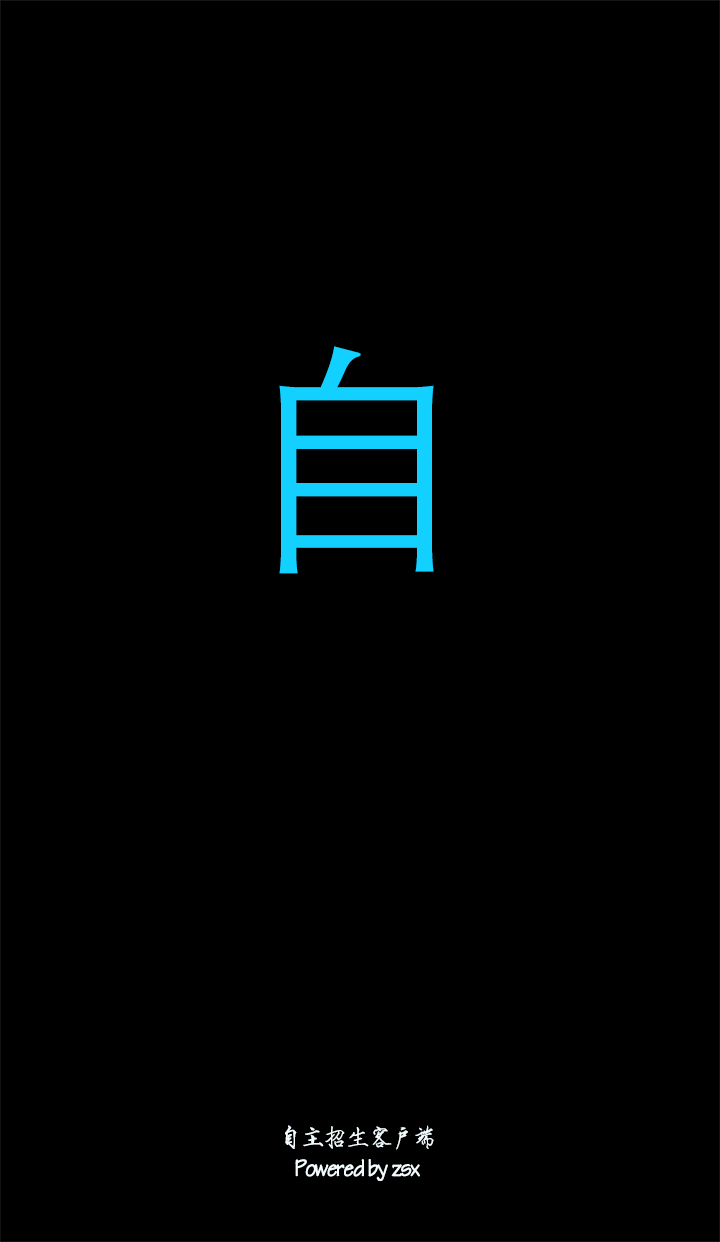
<style>
.page{position:relative;width:720px;height:1242px;background:#000000}
.page>*{position:absolute;margin:0}
.t1{font:247.4px "FZDX--GB1-4";letter-spacing:-0.06em;color:#12d0ff;scale:0.94 1}
.t2{font:24.7px "FZSJSJW--GB1-0";letter-spacing:-0.06em;color:#f3fcfe;font-weight:bold;scale:0.94 1}
</style>
<div class="page">
<p class="t1" style="left:279px;top:346px;width:155px;height:228px">自</p>
<p class="t2" style="left:285px;top:1125px;width:149px;height:56px;text-align:center">自主招生客户端<br>Powered by zsx</p>
</div>
